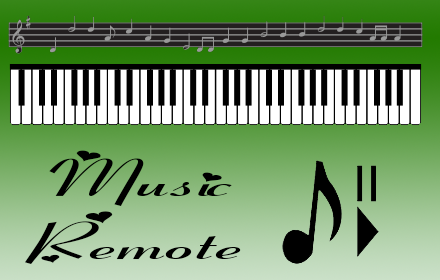
<style>
.page{position:relative;width:440px;height:280px}
.page>*{position:absolute;margin:0}
.t1{font:52px "FiolexGirls-Regular";color:#000000;scale:2 1}
</style>
<div class="page">
<p class="t1" style="left:25px;top:150px;width:216px;height:114px;text-align:center">Music<br>Remote</p>
</div>
